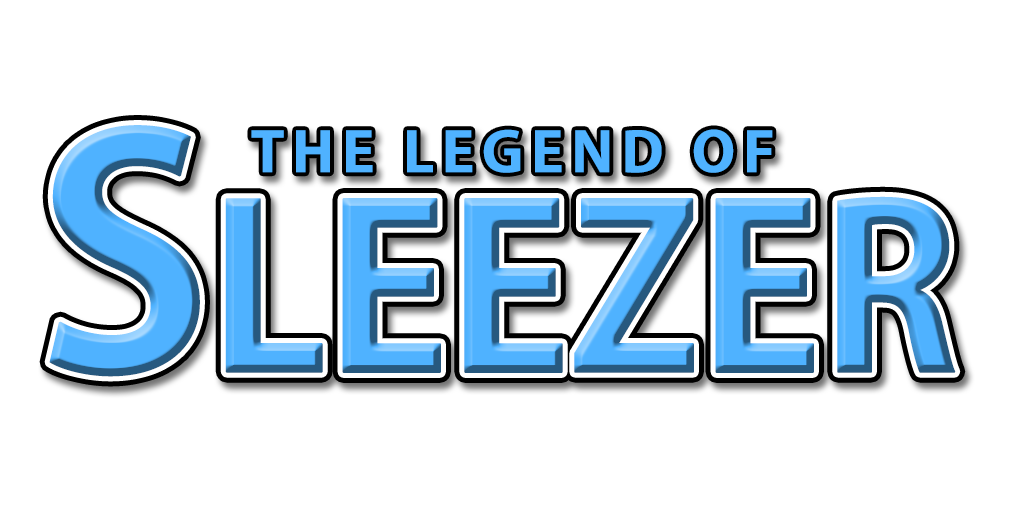
<style>
.page{position:relative;width:1024px;height:512px;background:#ffffff}
.page>*{position:absolute;margin:0}
.t1{font:225px "AdobeGothicStd-Bold";letter-spacing:-0.03em;color:#4fb2ff;font-weight:bold}
.t2{font:315px "AdobeGothicStd-Bold";letter-spacing:-0.03em;color:#4fb2ff;font-weight:bold}
.t3{font:54px "AdobeGothicStd-Bold";letter-spacing:0.1em;color:#4fb2ff;font-weight:bold;scale:1.11 1}
</style>
<div class="page">
<p class="t1" style="left:49px;top:125px;width:907px;height:252px"><span class="t2">S</span>LEEZER</p>
<p class="t3" style="left:251px;top:129px;width:522px;height:44px">THE LEGEND OF</p>
</div>
